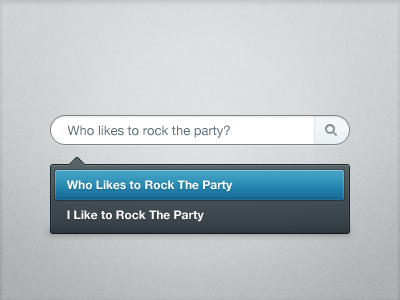
<style>
.page{position:relative;width:400px;height:300px}
.page>*{position:absolute;margin:0}
.t1{font:13px "HelveticaNeue";color:#607078}
.t2{font:12px/30px "HelveticaNeue-Bold";color:#ffffff}
</style>
<div class="page">
<p class="t1" style="left:67px;top:125px;width:163px;height:13px">Who likes to rock the party?</p>
<p class="t2" style="left:66px;top:180px;width:167px;height:42px">Who Likes to Rock The Party<br>I Like to Rock The Party</p>
</div>
